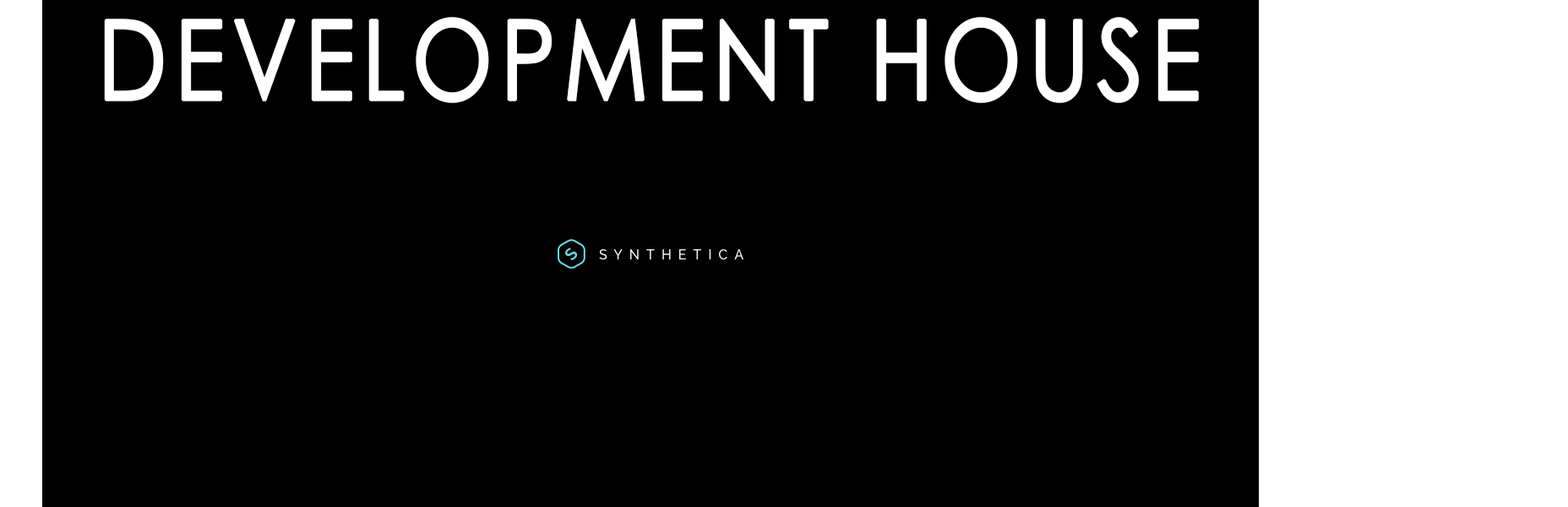
<style>
.page{position:relative;width:1568px;height:507px;background:#000000}
.page>*{position:absolute;margin:0}
.t1{font:110.5px "CenturyGothic";letter-spacing:0.06em;color:#fffffe;text-transform:uppercase;font-weight:bold;scale:0.83 1}
</style>
<div class="page">
<p class="t1" style="left:104px;top:17px;width:1096px;height:86px">Development House</p>
</div>
